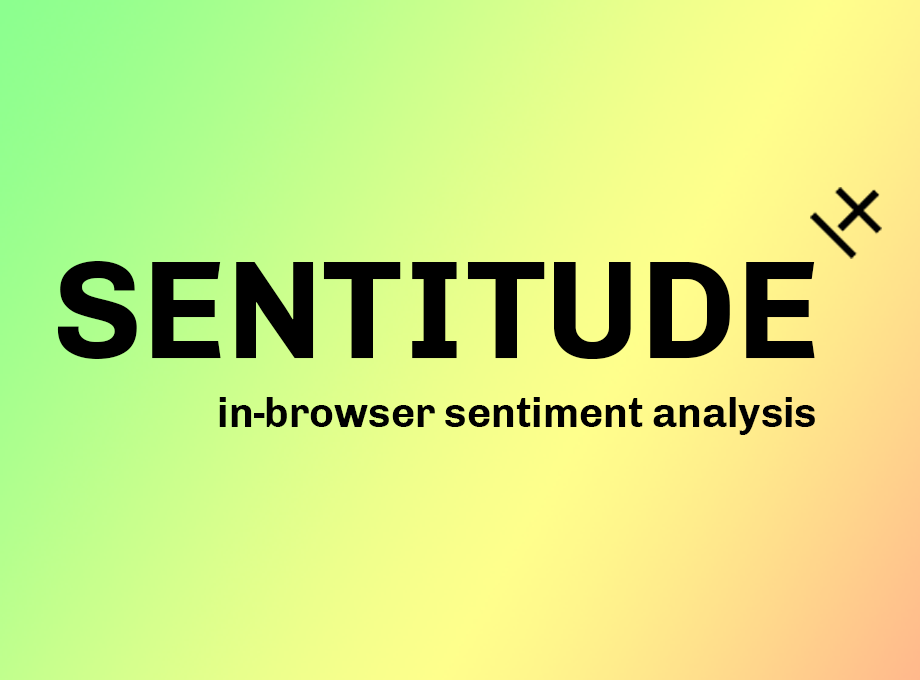
<style>
.page{position:relative;width:920px;height:680px}
.page>*{position:absolute;margin:0}
.t1{font:140.8px "Chivo-Bold";color:#000000}
.t2{font:41.5px "Chivo-Bold";color:#000000}
</style>
<div class="page">
<p class="t1" style="left:57px;top:261px;width:758px;height:98px">SENTITUDE</p>
<p class="t2" style="left:219px;top:397px;width:596px;height:38px">in-browser sentiment analysis</p>
</div>
